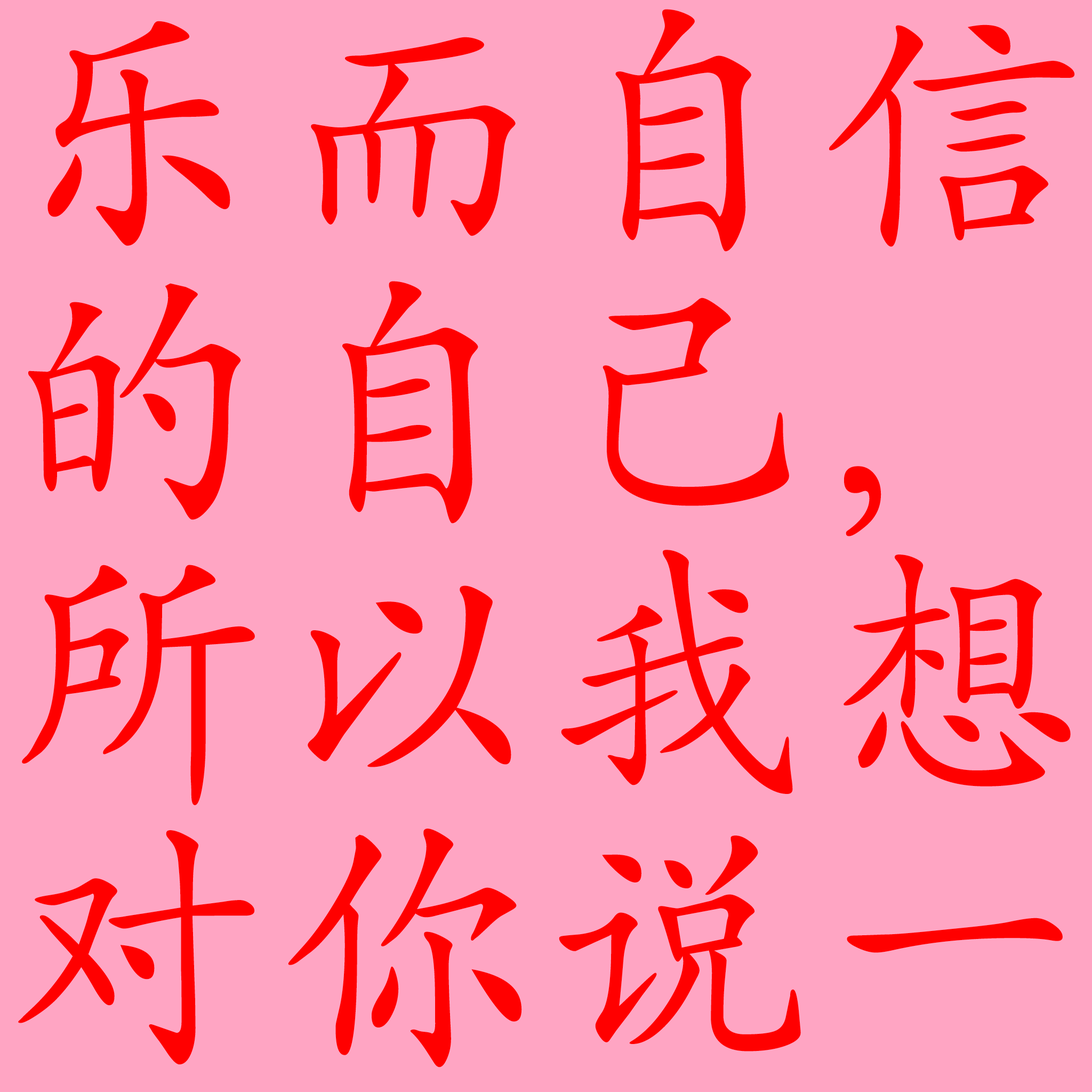
<style>
.page{position:relative;width:1092px;height:1092px;background:#ffa5c3}
.page>*{position:absolute;margin:0}
.t1{font:266.6px/271.9px "SIL-Kai-Reg-Jian";letter-spacing:0.025em;color:#ff0000}
</style>
<div class="page">
<p class="t1" style="left:18px;top:9px;width:1057px;height:1058px">乐而自信<br>的自己，<br>所以我想<br>对你说一</p>
</div>
